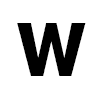
<style>
.page{position:relative;width:100px;height:100px;background:#ffffff}
.page>*{position:absolute;margin:0}
.t1{font:72px "AvantGardeLT-Bold";color:#000000}
</style>
<div class="page">
<p class="t1" style="left:17px;top:23px;width:69px;height:53px">W</p>
</div>
